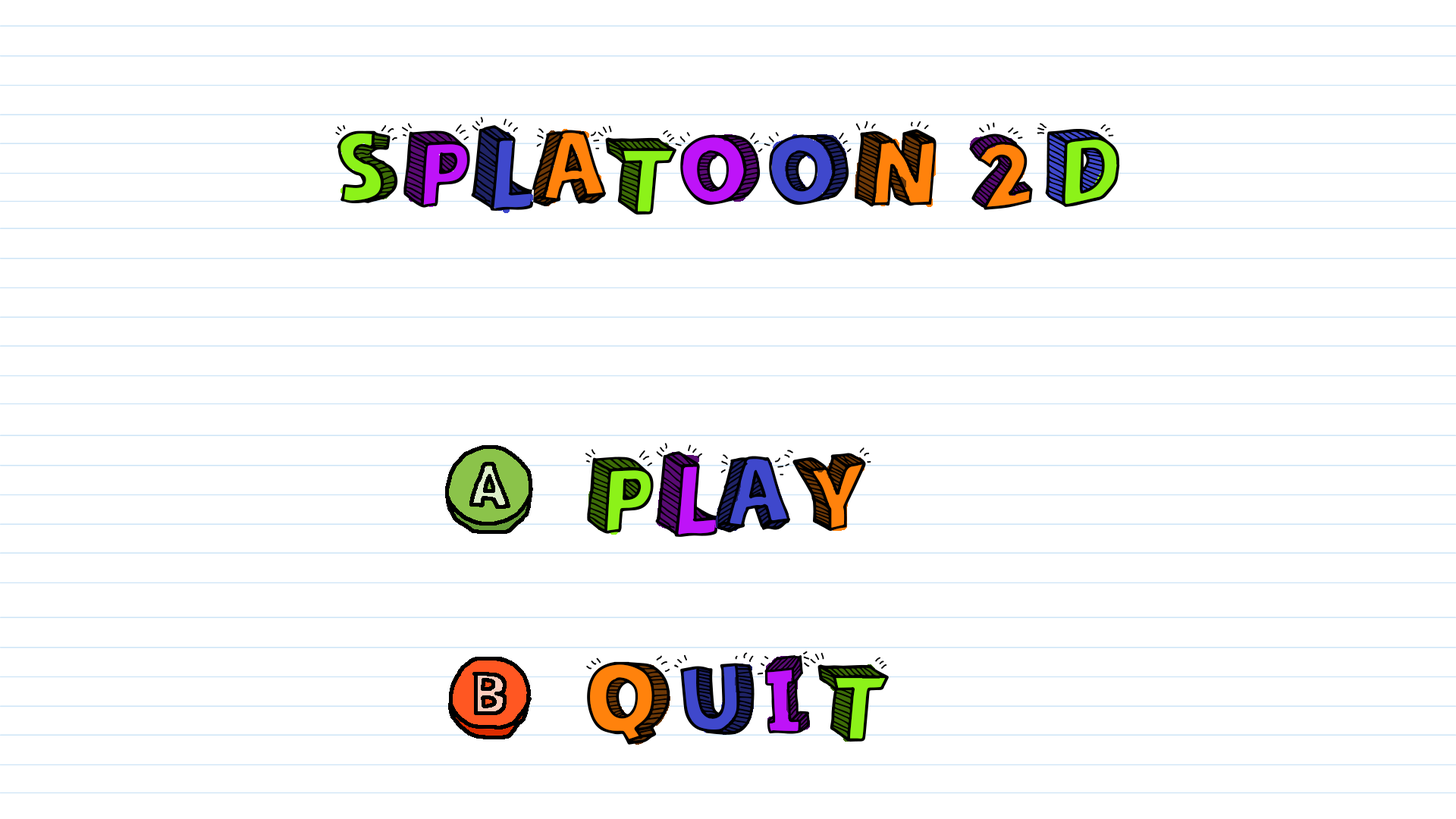
<style>
.page{position:relative;width:1456px;height:819px;background:#ffffff}
.page>*{position:absolute;margin:0}
.t1{font:109.2px "Sketch3D";color:#000000}
</style>
<div class="page">
<p class="t1" style="left:335px;top:117px;width:785px;height:98px">SPLATOON 2D</p>
<p class="t1" style="left:585px;top:443px;width:286px;height:94px">PLAY</p>
<p class="t1" style="left:586px;top:651px;width:303px;height:94px">QUIT</p>
</div>
